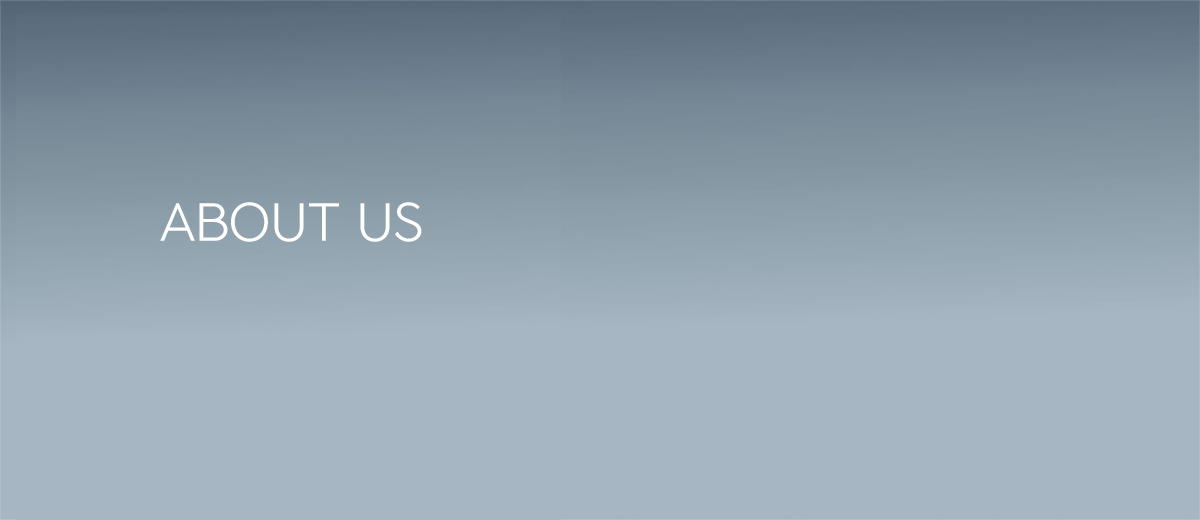
<style>
.page{position:relative;width:1200px;height:520px;background:#a6b6c3}
.page>*{position:absolute;margin:0}
.t1{font:50px "NEXONLv1GothicLowOTFRegular";color:#ffffff}
</style>
<div class="page">
<p class="t1" style="left:160px;top:202px;width:262px;height:40px">ABOUT US</p>
</div>
